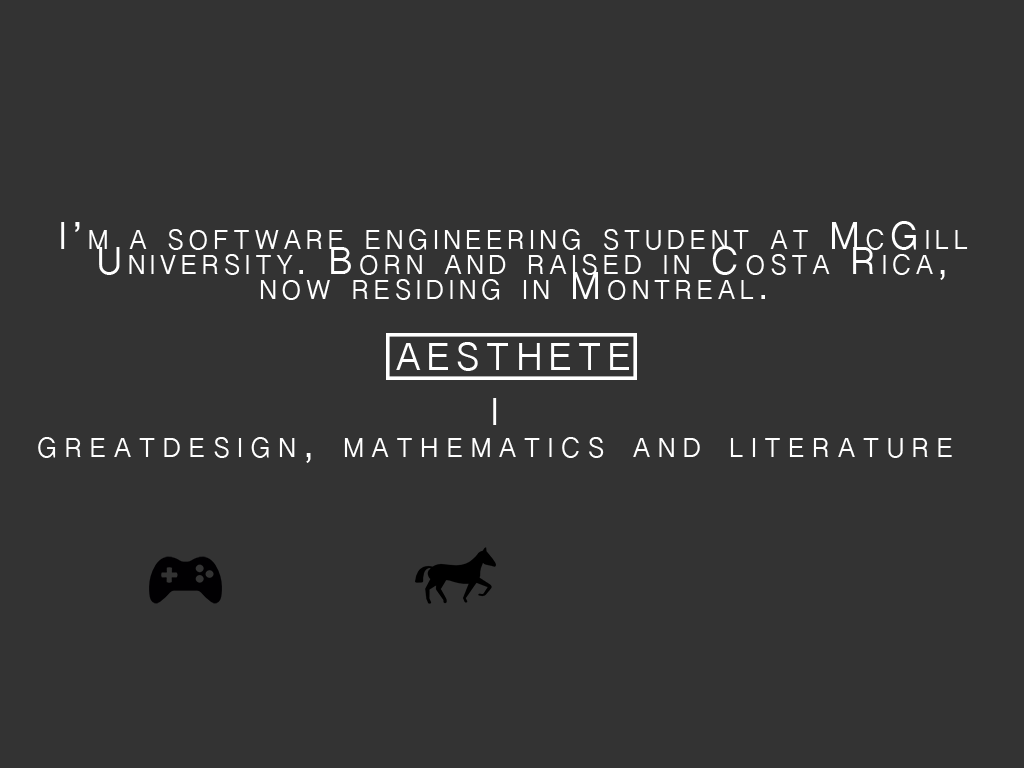
<style>
.page{position:relative;width:1024px;height:768px;background:#333333}
.page>*{position:absolute;margin:0}
.t1{font:36px/25px "SinhalaSangamMN";letter-spacing:0.2em;color:#ffffff;font-variant:small-caps}
.t2{font:36px "SinhalaSangamMN";letter-spacing:0.2em;color:#ffffff;font-variant:small-caps}
.t3{font:36px "SinhalaSangamMN";letter-spacing:0.32em;color:#ffffff;font-variant:small-caps}
</style>
<div class="page">
<p class="t1" style="left:61px;top:221px;width:907px;height:79px;text-align:center">I’m a software engineering student at McGill<br> University. Born and raised in Costa Rica,<br>now residing in Montreal.</p>
<p class="t2" style="left:396px;top:342px;width:233px;height:29px">AESTHETE</p>
<p class="t2" style="left:493px;top:398px;width:4px;height:27px">I</p>
<p class="t3" style="left:38px;top:437px;width:914px;height:26px">greatdesign, mathematics and literature</p>
</div>
